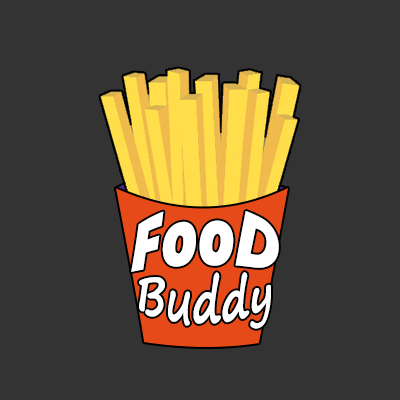
<style>
.page{position:relative;width:400px;height:400px;background:#333333}
.page>*{position:absolute;margin:0}
.t1{font:58.3px "SegoeUIBlack-Italic";letter-spacing:0.01em;color:#ffffff}
.t2{font:41.7px "SegoePrint-Bold";letter-spacing:0.01em;color:#ffffff}
</style>
<div class="page">
<p class="t1" style="left:131px;top:211px;width:148px;height:61px">FooD</p>
<p class="t2" style="left:139px;top:272px;width:132px;height:57px">Buddy</p>
</div>
